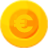
<style>
.page{position:relative;width:48px;height:48px}
.page>*{position:absolute;margin:0}
.t1{font:25px "Poppins-Bold";color:#fccd05}
</style>
<div class="page">
<p class="t1" style="left:14px;top:14px;width:19px;height:19px">€</p>
</div>
